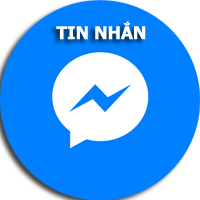
<style>
.page{position:relative;width:200px;height:200px;background:#007fff}
.page>*{position:absolute;margin:0}
.t1{font:17.5px "Tahoma-Bold";color:#ffffff}
</style>
<div class="page">
<p class="t1" style="left:56px;top:21px;width:90px;height:19px">TIN NHẮN</p>
</div>
